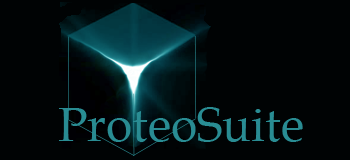
<style>
.page{position:relative;width:350px;height:160px;background:#000304}
.page>*{position:absolute;margin:0}
.t1{font:48px "BookAntiqua";color:#298c93}
</style>
<div class="page">
<p class="t1" style="left:59px;top:107px;width:244px;height:35px">ProteoSuite</p>
</div>
